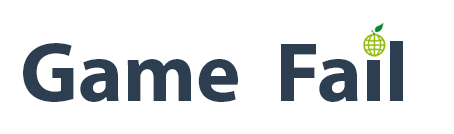
<style>
.page{position:relative;width:454px;height:134px;background:#ffffff}
.page>*{position:absolute;margin:0}
.t1{font:84.7px "MyriadPro-Bold";color:#2c3e50}
</style>
<div class="page">
<p class="t1" style="left:23px;top:41px;width:380px;height:61px">Game  Fail</p>
</div>
